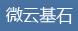
<style>
.page{position:relative;width:78px;height:31px;background:#4771a1}
.page>*{position:absolute;margin:0}
.t1{font:16.7px "MicrosoftYaHei";color:#ffffff}
</style>
<div class="page">
<p class="t1" style="left:6px;top:6px;width:67px;height:18px">微云基石</p>
</div>
